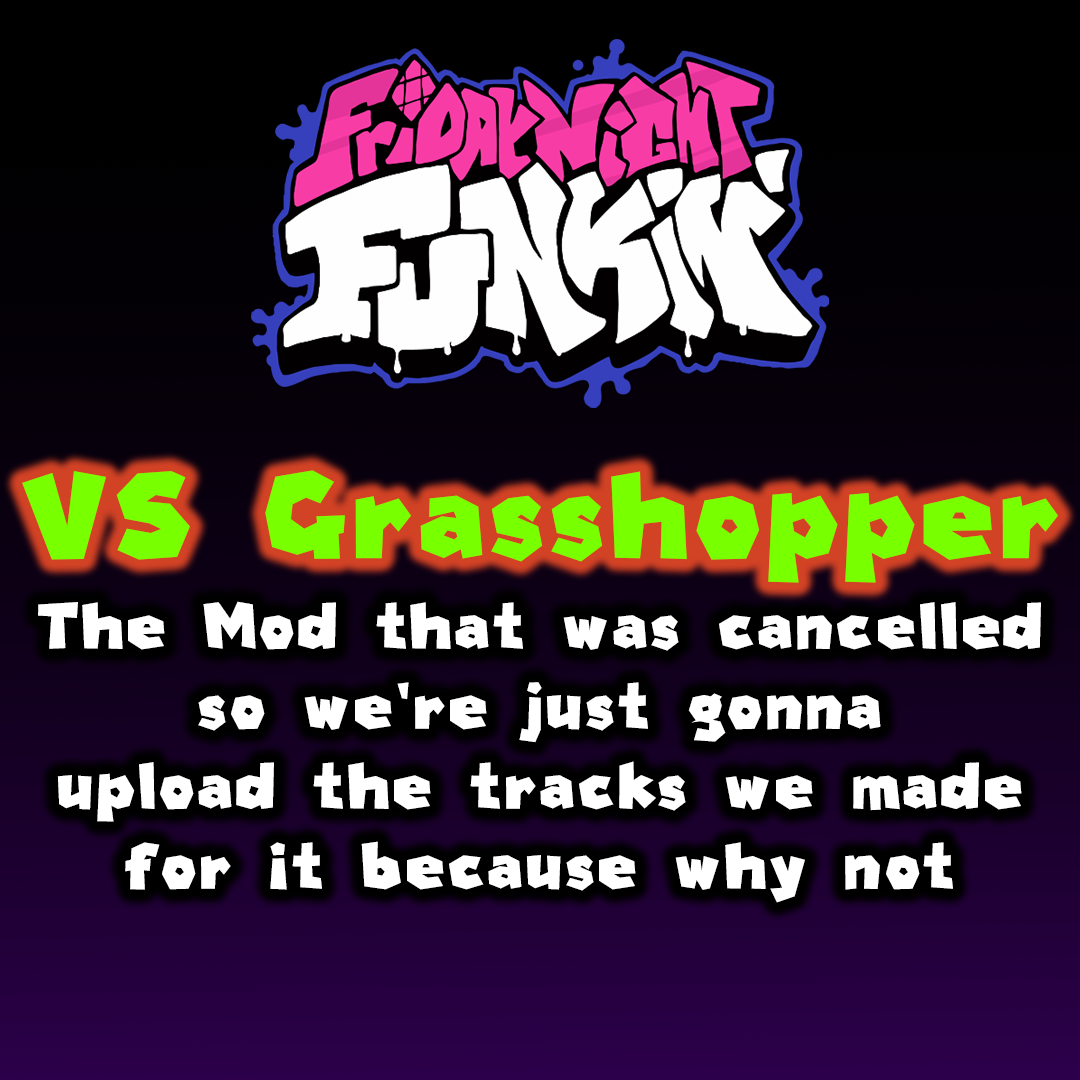
<style>
.page{position:relative;width:1080px;height:1080px}
.page>*{position:absolute;margin:0}
.t1{font:125px "PolygonParty";color:#78ff00}
.t2{font:66.7px "PolygonParty";color:#ffffff}
</style>
<div class="page">
<p class="t1" style="left:22px;top:470px;width:1036px;height:113px">VS Grasshopper</p>
<p class="t2" style="left:38px;top:601px;width:1003px;height:302px;text-align:center">The Mod that was cancelled<br>so we're just gonna<br>upload the tracks we made<br>for it because why not</p>
</div>
